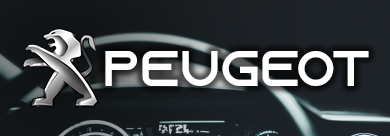
<style>
.page{position:relative;width:390px;height:136px}
.page>*{position:absolute;margin:0}
.t1{font:50px "AzonixRegular";color:#ffffff}
</style>
<div class="page">
<p class="t1" style="left:105px;top:51px;width:264px;height:35px">peugeot</p>
</div>
